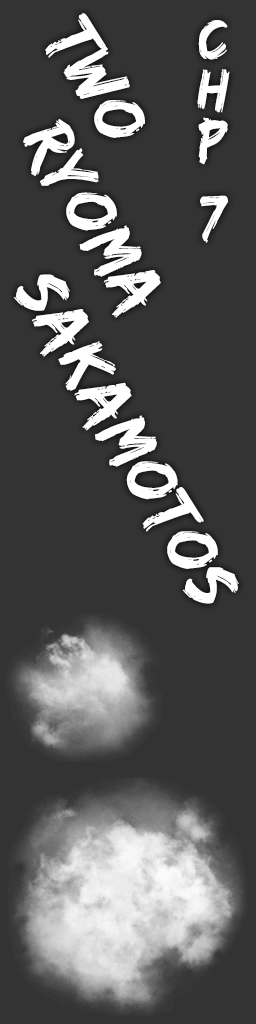
<style>
.page{position:relative;width:256px;height:1024px;background:#333333}
.page>*{position:absolute;margin:0}
.t1{font:72px "EdoSZ";letter-spacing:0.03em;color:#ffffff}
.t2{font:60px/25.1px "EdoSZ";letter-spacing:0.03em;color:#ffffff}
</style>
<div class="page">
<p class="t1" style="left:45px;top:13px;width:100px;height:125px;rotate:60deg">Two</p>
<p class="t2" style="left:197px;top:20px;width:33px;height:223px;text-align:center">C<br><br>H<br><br>P<br><br><br>7</p>
<p class="t1" style="left:23px;top:119px;width:138px;height:199px;rotate:60deg">Ryoma</p>
<p class="t1" style="left:13px;top:274px;width:226px;height:330px;rotate:60deg">Sakamotos</p>
</div>
